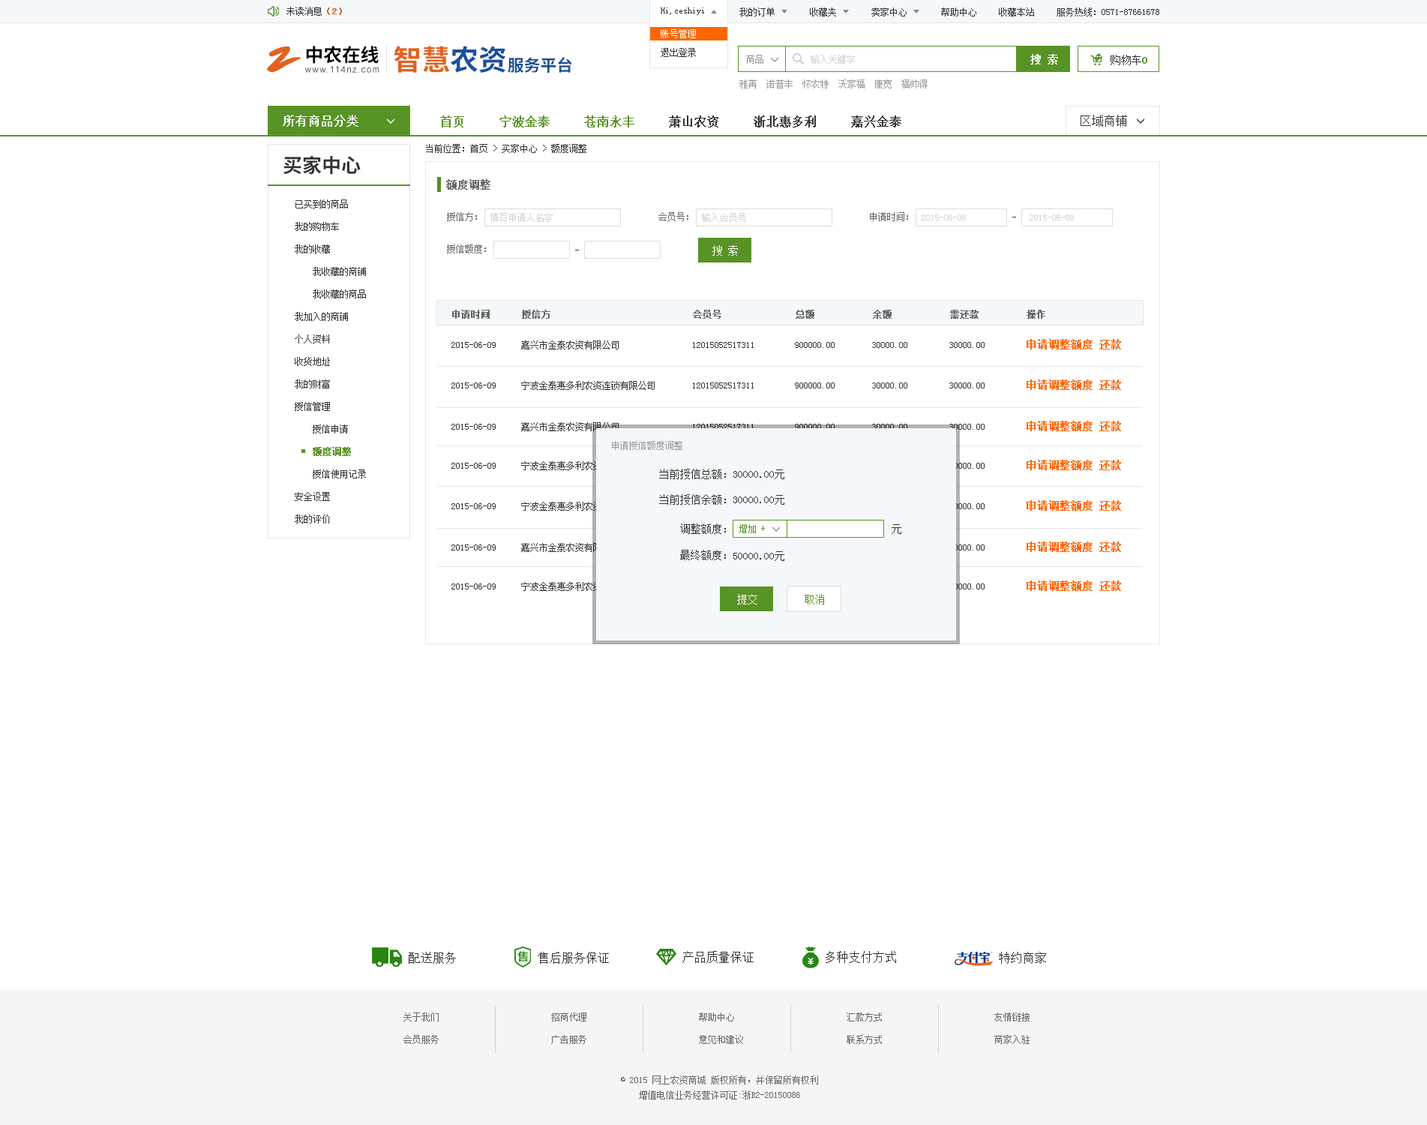
<style>
.page{position:relative;width:1427px;height:1125px;background:#ffffff}
.page>*{position:absolute;margin:0}
.t1{font:9px "SimSun";color:#333333}
.t2{font:9px "SimSun";color:#e0631f;font-weight:bold}
.t3{font:9px/18.8px "SimSun";color:#ffffff}
.t4{font:9px/18.8px "SimSun";color:#333333}
.t5{font:38px "SmudgerLetPlain";color:#e0631f}
.t6{font:18.6px "SourceHanSansCN-Bold";color:#060001}
.t7{font:28.4px "SourceHanSansCN-Bold";color:#e0631f}
.t8{font:28.4px "SourceHanSansCN-Bold";color:#1a529c}
.t9{font:10.5px "SimSun";color:#ffffff;font-weight:bold}
.t10{font:16.3px "SourceHanSansCN-Bold";color:#194f93}
.t11{font:9px "SimSun";color:#999999}
.t12{font:9px "SimSun";color:#d1d1d1}
.t13{font:10.5px "SimSun";color:#333333}
.t14{font:10.5px "SimSun";color:#589325;font-weight:bold}
.t15{font:8.9px "ArialMT";letter-spacing:0.1em;color:#585859}
.t16{font:12px "SimSun";color:#ffffff;font-weight:bold}
.t17{font:12px "SimSun";color:#333333;font-weight:bold}
.t18{font:12px "SimSun";color:#589325;font-weight:bold}
.t19{font:12px "SimSun";color:#333333}
.t20{font:19.5px "SourceHanSansCN-Bold";color:#333333}
.t21{font:10.5px "SimSun";color:#666666;font-weight:bold}
.t22{font:9px/22.5px "SimSun";color:#333333}
.t23{font:9px/22.5px "SimSun";color:#589325;font-weight:bold}
.t24{font:9px "SimSun";color:#666666}
.t25{font:10.5px "SimSun";color:#ffffff}
.t26{font:9px "SimSun";color:#666666;font-weight:bold}
.t27{font:10.5px "SimSun";color:#ff6600;font-weight:bold}
.t28{font:9px "SimSun"}
.t29{font:9px "SimSun";color:#589325}
.t30{font:10.5px "SimSun";color:#589325}
.t31{font:9px/22.5px "SimSun";color:#666666}
.t32{font:9px/15px "SimSun";color:#666666}
</style>
<div class="page">
<p class="t1" style="left:286px;top:7px;width:56px;height:9px">未读消息<span class="t2">（2）</span></p>
<p class="t1" style="left:661px;top:8px;width:43px;height:7px">Hi,ceshiyi</p>
<p class="t1" style="left:661px;top:8px;width:43px;height:7px">Hi,ceshiyi</p>
<p class="t1" style="left:740px;top:8px;width:35px;height:8px">我的订单</p>
<p class="t1" style="left:810px;top:8px;width:26px;height:8px">收藏夹</p>
<p class="t1" style="left:872px;top:8px;width:35px;height:8px">卖家中心</p>
<p class="t1" style="left:941px;top:8px;width:35px;height:8px">帮助中心</p>
<p class="t1" style="left:999px;top:8px;width:35px;height:8px">收藏本站</p>
<p class="t1" style="left:1057px;top:8px;width:103px;height:8px">服务热线：0571-87661678</p>
<p class="t3" style="left:661px;top:29px;width:35px;height:28px">账号管理<br><span class="t4">退出登录</span></p>
<p class="t5" style="left:267px;top:46px;width:35px;height:27px">Z</p>
<p class="t6" style="left:306px;top:46px;width:73px;height:18px">中农在线</p>
<p class="t7" style="left:394px;top:46px;width:112px;height:27px">智慧<span class="t8">农资</span></p>
<p class="t9" style="left:1030px;top:54px;width:28px;height:10px">搜 索</p>
<p class="t10" style="left:508px;top:57px;width:64px;height:16px">服务平台</p>
<p class="t11" style="left:746px;top:55px;width:18px;height:9px">商品</p>
<p class="t12" style="left:811px;top:55px;width:44px;height:9px">输入关键字</p>
<p class="t13" style="left:1111px;top:55px;width:37px;height:10px">购物车<span class="t14">0</span></p>
<p class="t15" style="left:304px;top:66px;width:76px;height:7px">www.114nz.com</p>
<p class="t11" style="left:740px;top:80px;width:188px;height:8px">雅苒  诺普丰  怀农特  沃家福  康宽  福帅得</p>
<p class="t16" style="left:283px;top:115px;width:75px;height:12px">所有商品分类</p>
<p class="t17" style="left:440px;top:116px;width:462px;height:12px"><span class="t18">首页     宁波金泰     苍南永丰    </span> 萧山农资     浙北惠多利     嘉兴金泰</p>
<p class="t19" style="left:1081px;top:115px;width:46px;height:12px">区域商铺</p>
<p class="t1" style="left:426px;top:144px;width:160px;height:9px">当前位置：首页 &gt; 买家中心 &gt; 额度调整</p>
<p class="t20" style="left:284px;top:155px;width:77px;height:20px">买家中心</p>
<p class="t21" style="left:446px;top:179px;width:44px;height:11px">额度调整</p>
<p class="t22" style="left:295px;top:200px;width:71px;height:324px">已买到的商品<br>我的购物车<br>我的收藏<br>    我收藏的商铺<br>    我收藏的商品<br>我加入的商铺<br>个人资料<br>收货地址<br>我的财富<br>授信管理<br>    授信申请<br>    <span class="t23">额度调整<br></span>    授信使用记录<br>安全设置<br>我的评价</p>
<p class="t24" style="left:447px;top:212px;width:30px;height:9px">授信方：</p>
<p class="t12" style="left:490px;top:213px;width:63px;height:9px">填写申请人名字</p>
<p class="t24" style="left:658px;top:212px;width:30px;height:9px">会员号：</p>
<p class="t12" style="left:702px;top:213px;width:44px;height:9px">输入会员号</p>
<p class="t24" style="left:870px;top:212px;width:38px;height:9px">申请时间：</p>
<p class="t12" style="left:922px;top:214px;width:44px;height:6px">2015-06-08</p>
<p class="t12" style="left:1030px;top:214px;width:44px;height:6px">2015-06-08</p>
<p class="t24" style="left:447px;top:244px;width:39px;height:10px">授信额度：</p>
<p class="t25" style="left:712px;top:245px;width:26px;height:11px">搜 索</p>
<p class="t26" style="left:452px;top:310px;width:594px;height:9px">申请时间      授信方                           会员号              总额           余额           需还款         操作</p>
<p class="t1" style="left:452px;top:342px;width:44px;height:6px">2015-06-09</p>
<p class="t1" style="left:521px;top:340px;width:98px;height:10px">嘉兴市金泰农资有限公司</p>
<p class="t1" style="left:693px;top:342px;width:61px;height:6px">12015052517311</p>
<p class="t1" style="left:795px;top:342px;width:40px;height:6px">900000.00</p>
<p class="t1" style="left:872px;top:342px;width:36px;height:6px">30000.00</p>
<p class="t1" style="left:950px;top:342px;width:35px;height:6px">30000.00</p>
<p class="t27" style="left:1027px;top:339px;width:94px;height:11px">申请调整额度 还款</p>
<p class="t1" style="left:452px;top:382px;width:44px;height:6px">2015-06-09</p>
<p class="t1" style="left:521px;top:381px;width:134px;height:9px">宁波金泰惠多利农资连锁有限公司</p>
<p class="t1" style="left:693px;top:382px;width:61px;height:6px">12015052517311</p>
<p class="t1" style="left:795px;top:382px;width:40px;height:6px">900000.00</p>
<p class="t1" style="left:872px;top:382px;width:36px;height:6px">30000.00</p>
<p class="t1" style="left:950px;top:382px;width:35px;height:6px">30000.00</p>
<p class="t27" style="left:1027px;top:380px;width:94px;height:10px">申请调整额度 还款</p>
<p class="t1" style="left:452px;top:424px;width:44px;height:6px">2015-06-09</p>
<p class="t1" style="left:521px;top:422px;width:98px;height:9px">嘉兴市金泰农资有限公司</p>
<p class="t1" style="left:693px;top:424px;width:61px;height:6px">12015052517311</p>
<p class="t1" style="left:795px;top:424px;width:40px;height:6px">900000.00</p>
<p class="t1" style="left:872px;top:424px;width:36px;height:6px">30000.00</p>
<p class="t1" style="left:950px;top:424px;width:35px;height:6px">30000.00</p>
<p class="t27" style="left:1027px;top:421px;width:94px;height:10px">申请调整额度 还款</p>
<p class="t11" style="left:612px;top:441px;width:70px;height:9px">申请授信额度调整</p>
<p class="t28" style="left:521px;top:461px;width:134px;height:9px">宁波金泰惠多利农资连锁有限公司</p>
<p class="t27" style="left:1027px;top:460px;width:94px;height:10px">申请调整额度 还款</p>
<p class="t1" style="left:452px;top:463px;width:44px;height:6px">2015-06-09</p>
<p class="t13" style="left:659px;top:469px;width:67px;height:10px">当前授信总额：</p>
<p class="t13" style="left:734px;top:470px;width:50px;height:9px">30000.00元</p>
<p class="t1" style="left:950px;top:463px;width:35px;height:6px">30000.00</p>
<p class="t13" style="left:659px;top:494px;width:67px;height:11px">当前授信余额：</p>
<p class="t13" style="left:734px;top:495px;width:50px;height:10px">30000.00元</p>
<p class="t1" style="left:452px;top:503px;width:44px;height:6px">2015-06-09</p>
<p class="t28" style="left:521px;top:502px;width:134px;height:9px">宁波金泰惠多利农资连锁有限公司</p>
<p class="t1" style="left:950px;top:503px;width:35px;height:6px">30000.00</p>
<p class="t27" style="left:1027px;top:500px;width:94px;height:11px">申请调整额度 还款</p>
<p class="t13" style="left:680px;top:524px;width:46px;height:10px">调整额度：</p>
<p class="t29" style="left:739px;top:524px;width:26px;height:9px">增加 +</p>
<p class="t13" style="left:892px;top:524px;width:10px;height:10px">元</p>
<p class="t1" style="left:452px;top:544px;width:44px;height:6px">2015-06-09</p>
<p class="t1" style="left:521px;top:543px;width:98px;height:9px">嘉兴市金泰农资有限公司</p>
<p class="t1" style="left:950px;top:544px;width:35px;height:6px">30000.00</p>
<p class="t27" style="left:1027px;top:542px;width:94px;height:10px">申请调整额度 还款</p>
<p class="t13" style="left:680px;top:550px;width:46px;height:10px">最终额度：</p>
<p class="t13" style="left:734px;top:551px;width:50px;height:10px">50000.00元</p>
<p class="t28" style="left:521px;top:582px;width:134px;height:9px">宁波金泰惠多利农资连锁有限公司</p>
<p class="t27" style="left:1027px;top:580px;width:94px;height:11px">申请调整额度 还款</p>
<p class="t1" style="left:452px;top:584px;width:44px;height:6px">2015-06-09</p>
<p class="t1" style="left:950px;top:584px;width:35px;height:6px">30000.00</p>
<p class="t25" style="left:737px;top:594px;width:21px;height:10px">提交</p>
<p class="t30" style="left:805px;top:594px;width:19px;height:10px">取消</p>
<p class="t19" style="left:409px;top:952px;width:47px;height:12px">配送服务</p>
<p class="t19" style="left:538px;top:952px;width:71px;height:12px">售后服务保证</p>
<p class="t19" style="left:682px;top:951px;width:72px;height:12px">产品质量保证</p>
<p class="t19" style="left:826px;top:951px;width:70px;height:12px">多种支付方式</p>
<p class="t19" style="left:999px;top:952px;width:47px;height:12px">特约商家</p>
<p class="t31" style="left:404px;top:1012px;width:35px;height:32px">关于我们<br>会员服务</p>
<p class="t31" style="left:551px;top:1012px;width:35px;height:32px">招商代理<br>广告服务</p>
<p class="t31" style="left:699px;top:1012px;width:44px;height:32px">帮助中心<br>意见和建议</p>
<p class="t31" style="left:847px;top:1012px;width:35px;height:32px">汇款方式<br>联系方式</p>
<p class="t31" style="left:994px;top:1012px;width:36px;height:32px">友情链接<br>商家入驻</p>
<p class="t32" style="left:621px;top:1076px;width:197px;height:24px;text-align:center">© 2015 网上农资商城 版权所有，并保留所有权利<br>增值电信业务经营许可证:浙B2-20150086</p>
</div>
